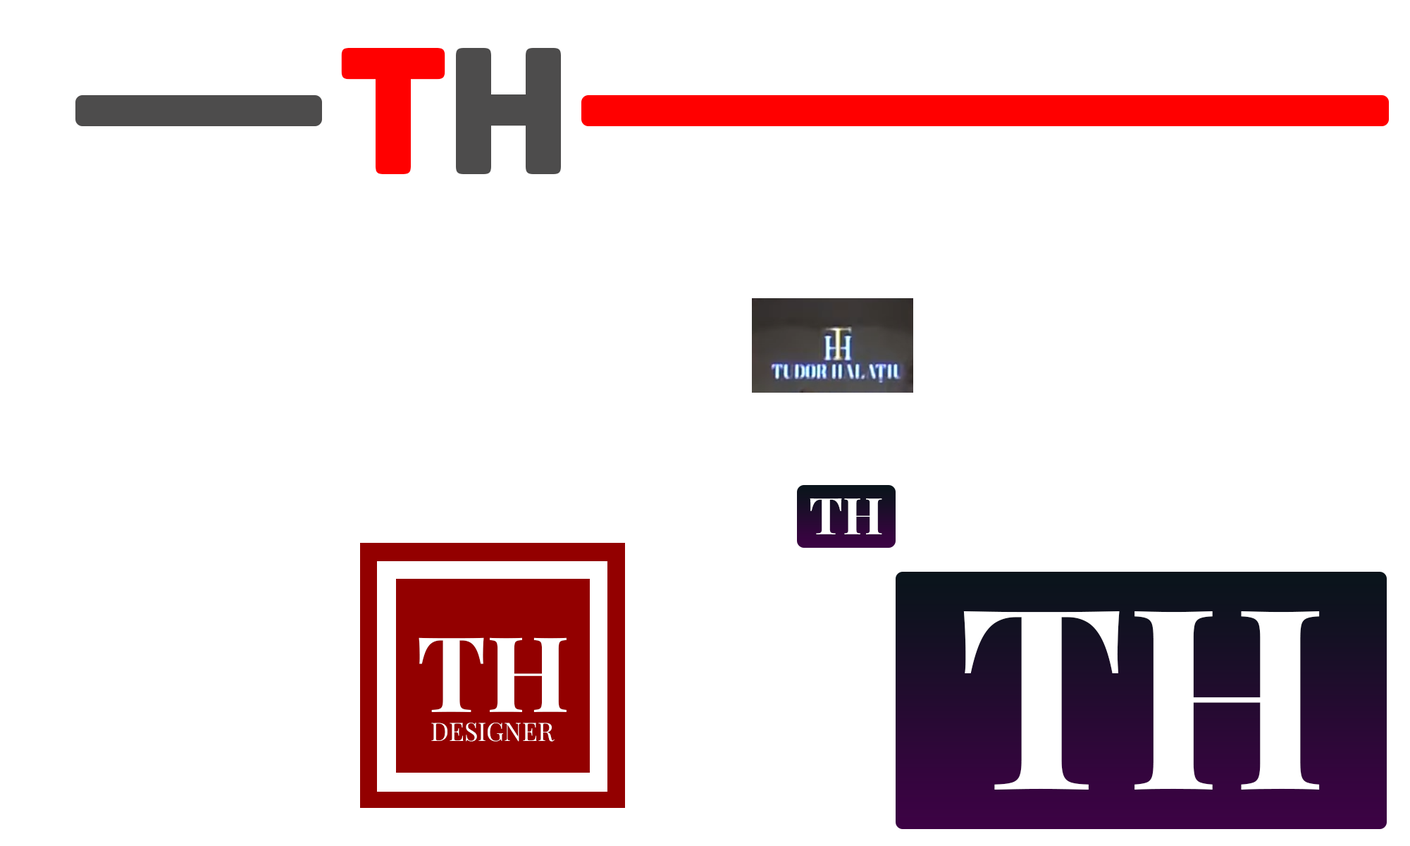
<style>
.page{position:relative;width:1410px;height:846px;background:#ffffff}
.page>*{position:absolute;margin:0}
.t1{font:178.1px "Panton-BlackCaps";color:#ff0000}
.t2{font:178.1px "Panton-BlackCaps";color:#4d4c4c}
.t3{font:50.7px "PlayfairDisplayRoman-Bold";color:#ffffff}
.t4{font:251.8px "PlayfairDisplayRoman-Bold";color:#ffffff}
.t5{font:104.6px "PlayfairDisplayRoman-Bold";color:#ffffff}
.t6{font:25.4px "PlayfairDisplay-Regular";color:#ffffff}
</style>
<div class="page">
<p class="t1" style="left:341px;top:48px;width:220px;height:126px">T<span class="t2">H</span></p>
<p class="t3" style="left:810px;top:498px;width:72px;height:36px">TH</p>
<p class="t4" style="left:963px;top:611px;width:357px;height:178px">TH</p>
<p class="t5" style="left:419px;top:637px;width:148px;height:75px">TH</p>
<p class="t6" style="left:431px;top:722px;width:124px;height:19px">DESIGNER</p>
</div>
